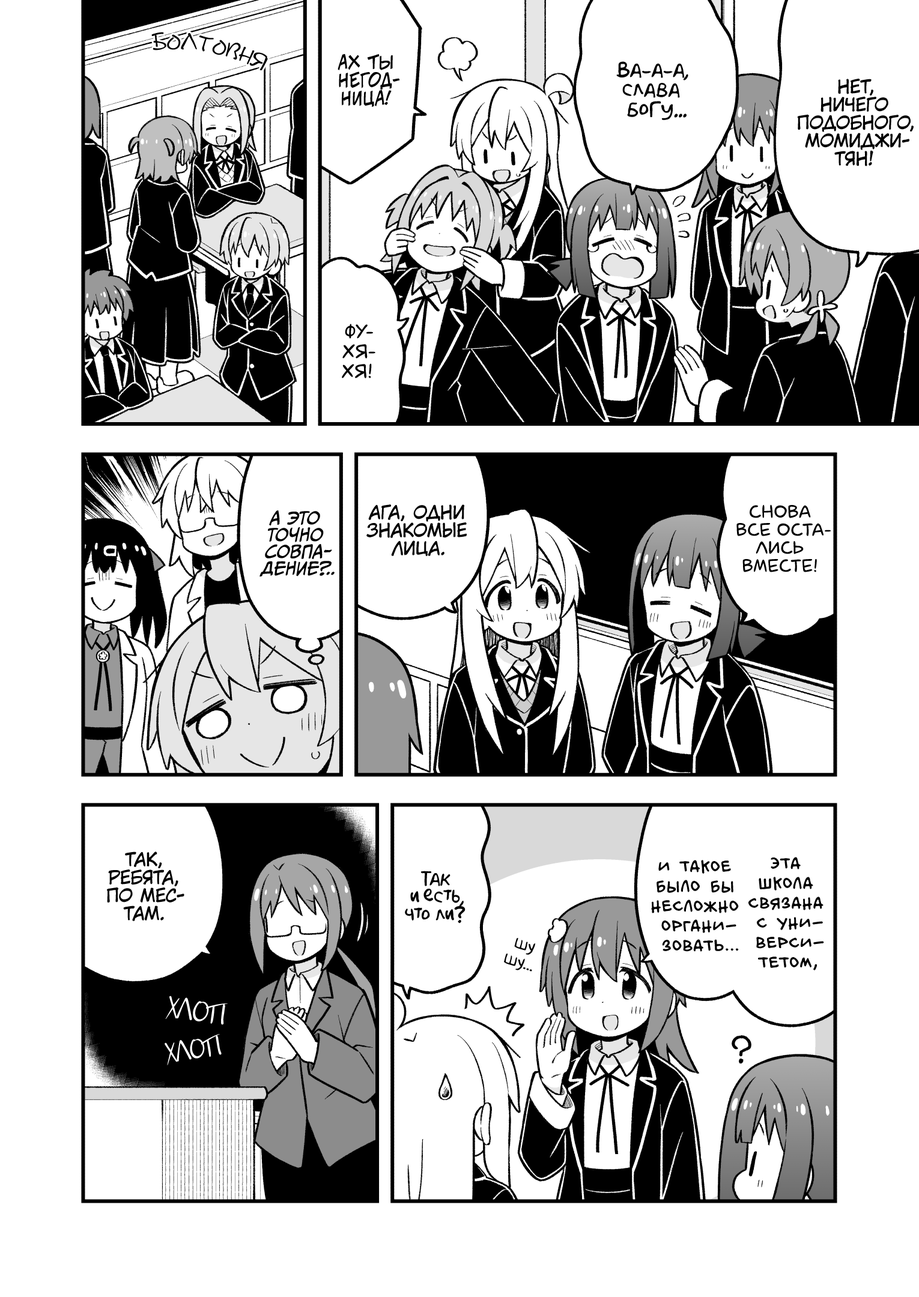
<style>
.page{position:relative;width:919px;height:1297px;background:#ffffff}
.page>*{position:absolute;margin:0}
.t1{font:21.6px "DSNote";color:#000000;scale:0.9 1}
.t2{font:18px "v_CCJeffCampbell";color:#000000;text-transform:uppercase}
.t3{font:19.8px "AkbarPlain";color:#000000}
.t4{font:18px "KuraiVoice2";color:#000000;text-transform:uppercase}
.t5{font:19.8px "laCartoonerie";color:#000000;text-transform:uppercase}
.t6{font:18px "laCartoonerie";color:#000000;text-transform:uppercase}
.t7{font:16.8px "CCMeanwhile";color:#000000;text-transform:uppercase;font-style:italic}
.t8{font:16.8px "CCMeanwhile";letter-spacing:-0.1em;color:#000000;text-transform:uppercase;font-style:italic}
.t9{font:19.8px "v_BillyTheFlyingRobotBBLC";color:#000000;text-transform:uppercase}
.t10{font:18px "AkbarPlain";color:#000000}
.t11{font:18px "v_Augie";color:#000000}
.t12{font:25.2px "JakobCTT-Regular";color:#ffffff;text-transform:uppercase}
.t13{font:24px "JakobCTT-Regular";color:#ffffff;text-transform:uppercase}
</style>
<div class="page">
<p class="t1" style="left:151px;top:32px;width:117px;height:38px;rotate:11deg">болтовня</p>
<p class="t2" style="left:338px;top:54px;width:62px;height:53px;text-align:center">Ах ты<br>негод-<br>ница!</p>
<p class="t3" style="left:616px;top:61px;width:72px;height:59px;text-align:center">Ва-а-а,<br>слава<br>богу...</p>
<p class="t4" style="left:797px;top:79px;width:117px;height:87px;text-align:center">Нет,<br>ничего<br>подобного,<br>Момиджи-<br>тян!</p>
<p class="t5" style="left:342px;top:324px;width:33px;height:54px;text-align:center">Фу-<br>хя-<br>хя!</p>
<p class="t4" style="left:366px;top:505px;width:101px;height:52px;text-align:center">Ага, одни<br>знакомые<br>лица.</p>
<p class="t6" style="left:736px;top:505px;width:95px;height:67px;text-align:center">Снова<br>все оста-<br>лись<br>вместе!</p>
<p class="t7" style="left:259px;top:511px;width:76px;height:66px;text-align:center">А это<br>точно<br>совпа-<br>дение<span class="t8">?</span>..</p>
<p class="t4" style="left:107px;top:852px;width:77px;height:69px;text-align:center">Так,<br>ребята,<br>по мес-<br>там.</p>
<p class="t9" style="left:748px;top:857px;width:76px;height:114px;text-align:center">Эта<br>школа<br>связана<br>с уни-<br>верси-<br>тетом,</p>
<p class="t9" style="left:651px;top:860px;width:88px;height:92px;text-align:center">и такое<br>было бы<br>несложно<br>органи-<br>зовать...</p>
<p class="t10" style="left:405px;top:871px;width:61px;height:53px;text-align:center">Так<br>и есть,<br>что ли?</p>
<p class="t11" style="left:504px;top:938px;width:31px;height:34px;text-align:center;rotate:19deg">шу<br>шу...</p>
<p class="t12" style="left:165px;top:996px;width:63px;height:29px;rotate:8deg">хлоп</p>
<p class="t13" style="left:165px;top:1034px;width:57px;height:32px;rotate:-9deg">хлоп</p>
</div>
